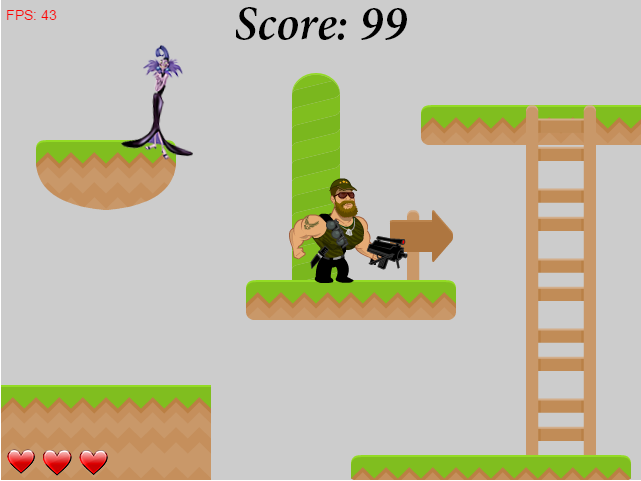
<style>
.page{position:relative;width:641px;height:481px;background:#cccccc}
.page>*{position:absolute;margin:0}
.t1{font:48px "MinionPro-SemiboldIt";color:#000000}
</style>
<div class="page">
<p class="t1" style="left:236px;top:7px;width:171px;height:33px">Score: 99</p>
</div>
